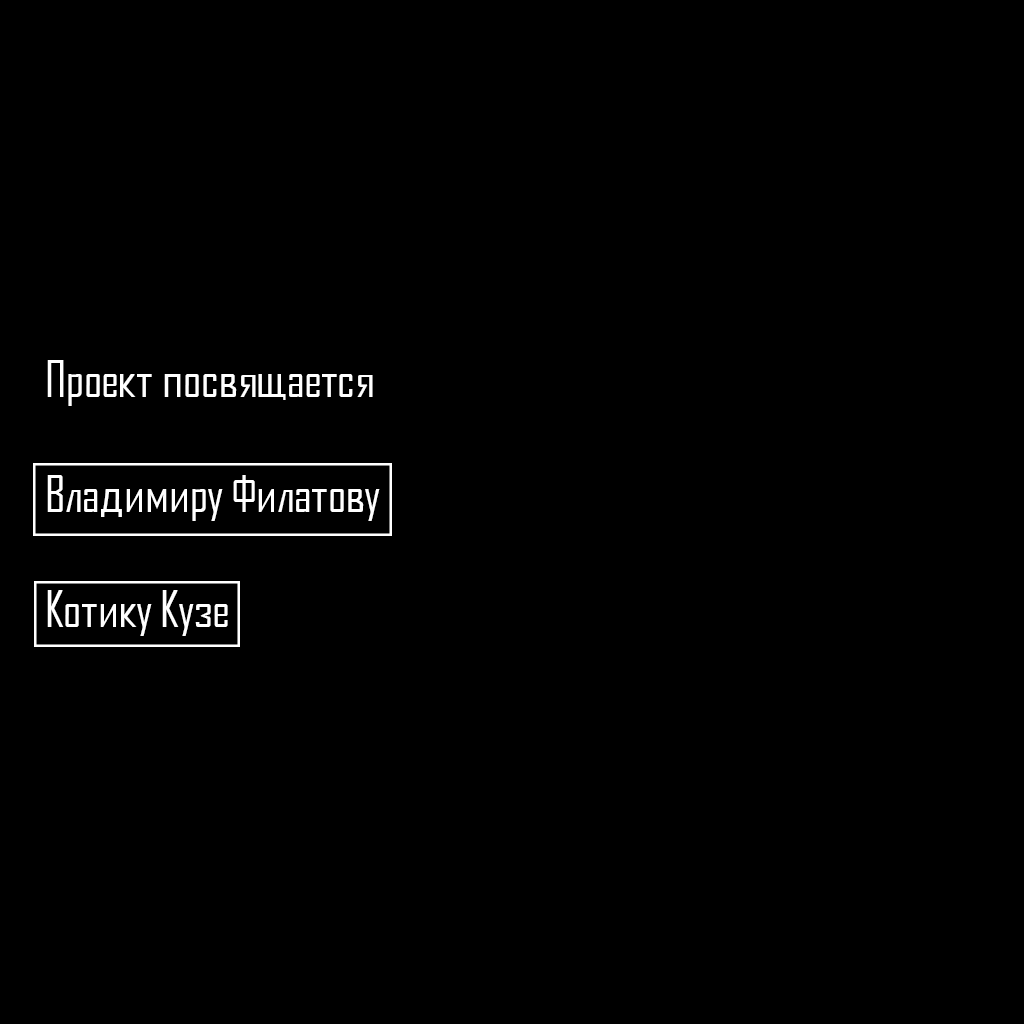
<style>
.page{position:relative;width:1024px;height:1024px;background:#000000}
.page>*{position:absolute;margin:0}
.t1{font:48px "AgencyFBCyrillic";color:#ffffff}
</style>
<div class="page">
<p class="t1" style="left:47px;top:360px;width:333px;height:276px">Проект посвящается<br><br>Владимиру Филатову<br><br>Котику Кузе</p>
</div>
